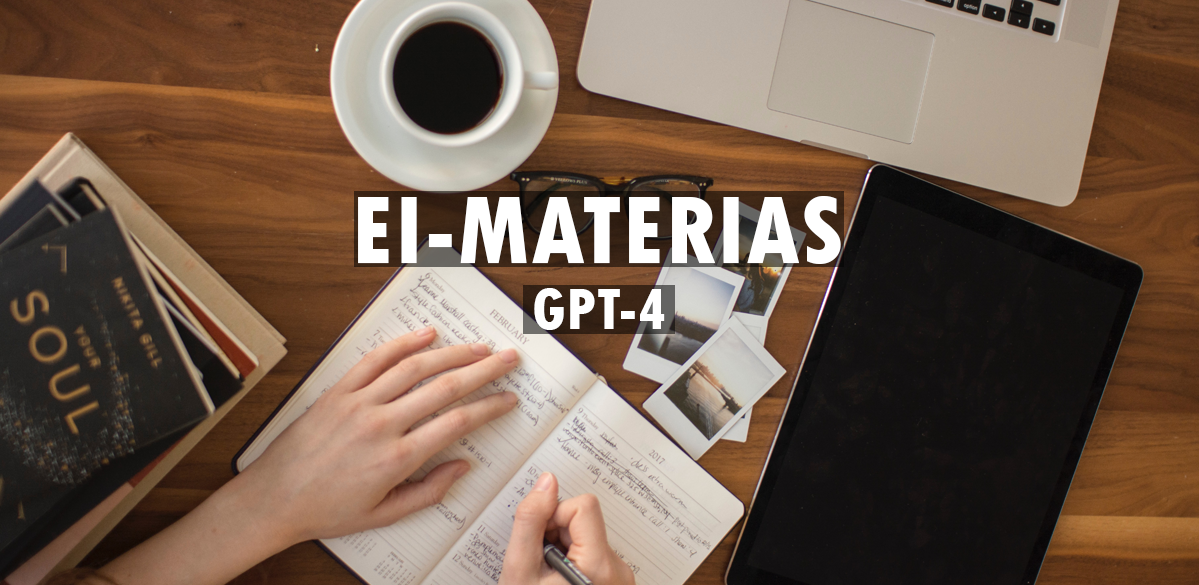
<style>
.page{position:relative;width:1199px;height:585px}
.page>*{position:absolute;margin:0}
.t1{font:101.4px "TwCenMT-CondensedExtraBold";color:#ffffff}
.t2{font:60.6px "TwCenMT-CondensedExtraBold";color:#ffffff}
</style>
<div class="page">
<p class="t1" style="left:358px;top:196px;width:483px;height:68px">EI-MATERIAS</p>
<p class="t2" style="left:534px;top:288px;width:131px;height:42px">GPT-4</p>
</div>
